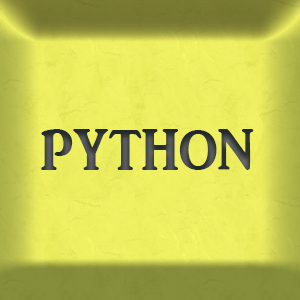
<style>
.page{position:relative;width:300px;height:300px}
.page>*{position:absolute;margin:0}
.t1{font:75px "ARJULIAN";scale:0.92 1}
</style>
<div class="page">
<p class="t1" style="left:41px;top:129px;width:213px;height:41px">python</p>
</div>
